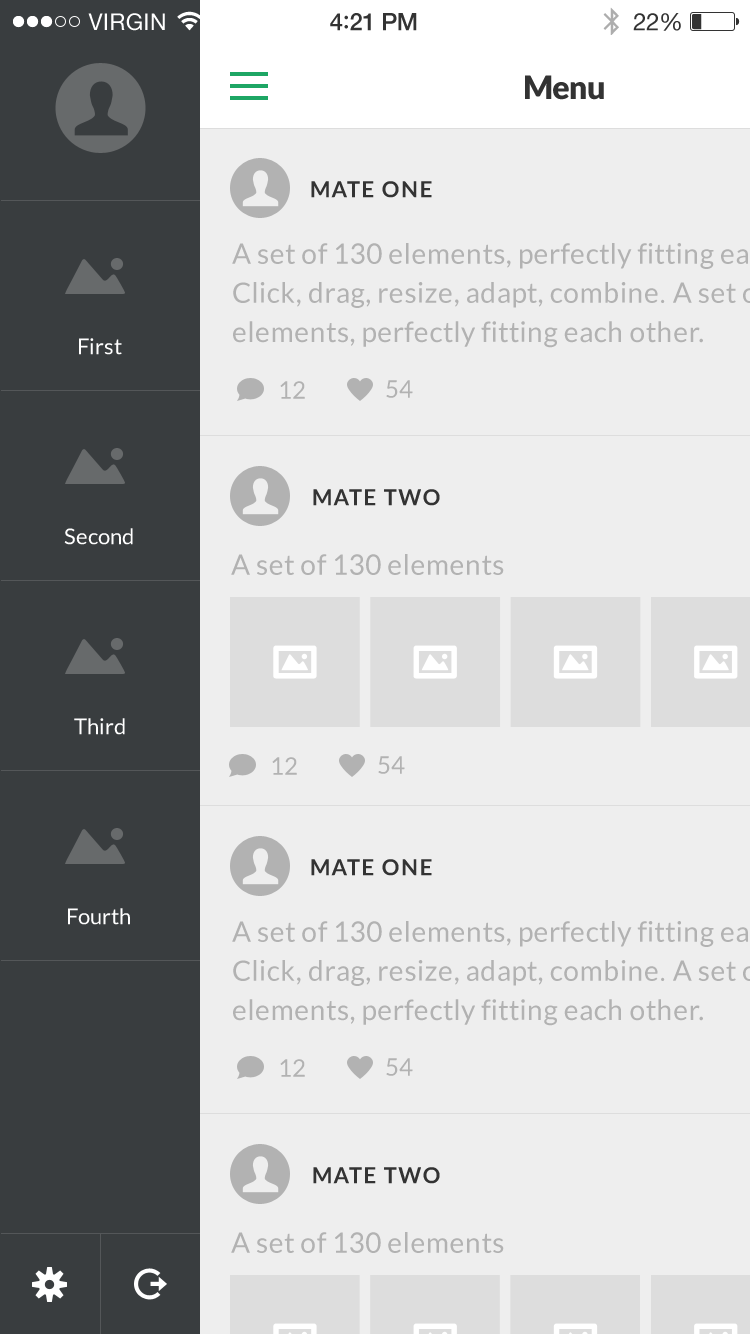
<style>
.page{position:relative;width:750px;height:1334px;background:#eeeeee}
.page>*{position:absolute;margin:0}
.t1{font:32px "Lato-Black";letter-spacing:-0.02em;color:#333333}
.t2{font:22px "Lato-Bold";letter-spacing:0.07em;color:#333333}
.t3{font:22px "Lato-Regular";color:#ffffff}
.t4{font:24px "Lato-Regular";color:#b2b2b2}
.t5{font:28px "Lato-Regular";letter-spacing:0.02em;color:#b2b2b2}
</style>
<div class="page">
<p class="t1" style="left:525px;top:75px;width:79px;height:25px">Menu</p>
<p class="t2" style="left:311px;top:181px;width:121px;height:17px">MATE ONE</p>
<p class="t3" style="left:79px;top:338px;width:43px;height:17px">First</p>
<p class="t4" style="left:280px;top:381px;width:25px;height:18px">12</p>
<p class="t4" style="left:386px;top:380px;width:27px;height:18px">54</p>
<p class="t2" style="left:313px;top:489px;width:127px;height:17px">MATE TWO</p>
<p class="t3" style="left:64px;top:528px;width:69px;height:17px">Second</p>
<p class="t5" style="left:231px;top:554px;width:273px;height:21px">A set of 130 elements</p>
<p class="t3" style="left:74px;top:718px;width:51px;height:17px">Third</p>
<p class="t4" style="left:272px;top:757px;width:25px;height:18px">12</p>
<p class="t4" style="left:378px;top:756px;width:27px;height:18px">54</p>
<p class="t2" style="left:311px;top:859px;width:121px;height:17px">MATE ONE</p>
<p class="t3" style="left:68px;top:908px;width:62px;height:17px">Fourth</p>
<p class="t4" style="left:280px;top:1059px;width:25px;height:18px">12</p>
<p class="t4" style="left:386px;top:1058px;width:27px;height:18px">54</p>
<p class="t2" style="left:313px;top:1167px;width:127px;height:17px">MATE TWO</p>
<p class="t5" style="left:231px;top:1232px;width:273px;height:21px">A set of 130 elements</p>
</div>
